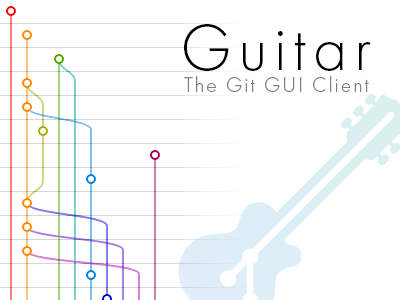
<style>
.page{position:relative;width:400px;height:300px;background:#ffffff}
.page>*{position:absolute;margin:0}
.t1{font:66.9px "FuturaPT-Light";letter-spacing:0.1em;color:#000000}
.t2{font:21.3px "FuturaPT-Light";letter-spacing:0.1em;color:#808080}
</style>
<div class="page">
<p class="t1" style="left:184px;top:24px;width:187px;height:47px">Guitar</p>
<p class="t2" style="left:184px;top:76px;width:185px;height:16px">The Git GUI Client</p>
</div>
